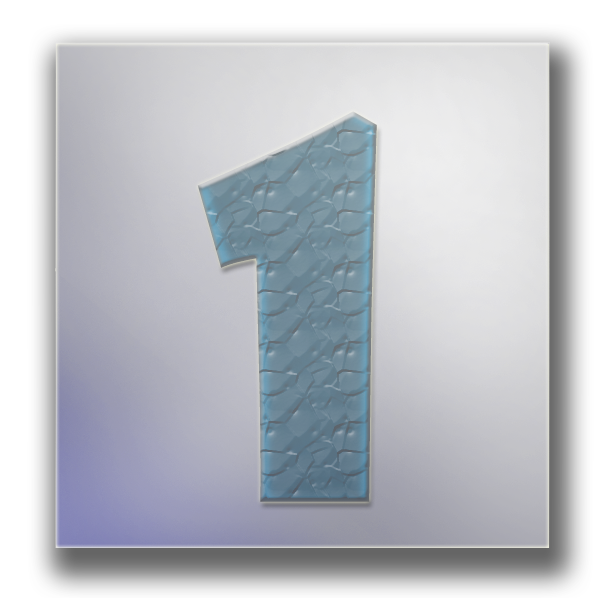
<style>
.page{position:relative;width:598px;height:598px}
.page>*{position:absolute;margin:0}
.t1{font:500px "ShowcardGothic-Reg";color:#708a99}
</style>
<div class="page">
<p class="t1" style="left:197px;top:111px;width:180px;height:391px">1</p>
</div>
